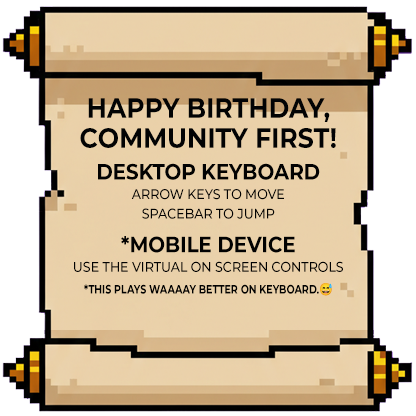
<style>
.page{position:relative;width:416px;height:416px}
.page>*{position:absolute;margin:0}
.t1{font:28px/30px "Montserrat-Bold";color:#020304;text-transform:uppercase;scale:0.9 1}
.t2{font:14px/19.6px "Montserrat-Medium";color:#020202;text-transform:uppercase;scale:0.9 1}
.t3{font:22px/22.4px "Montserrat-Bold";color:#020202;text-transform:uppercase;scale:0.9 1}
.t4{font:22px/14px "Montserrat-Bold";color:#020202;text-transform:uppercase;scale:0.9 1}
.t5{font:12px "Montserrat-Bold";color:#020202;text-transform:uppercase;scale:0.8 1}
.t6{font:12px "NotoColorEmoji-SVG";color:#020202;text-transform:uppercase;scale:0.9 1}
</style>
<div class="page">
<p class="t1" style="left:80px;top:98px;width:256px;height:50px;text-align:center">HAPPY BIRTHDAY,<br>COMMUNITY FIRST!</p>
<p class="t2" style="left:74px;top:163px;width:269px;height:109px;text-align:center"><span class="t3">Desktop Keyboard<br></span>Arrow Keys to move<br>Spacebar to jump<br><br><span class="t4">*Mobile Device<br></span>Use the virtual on screen controls</p>
<p class="t5" style="left:84px;top:283px;width:248px;height:13px">*This plays waaaay better on keyboard.<span class="t6">😅</span></p>
</div>
